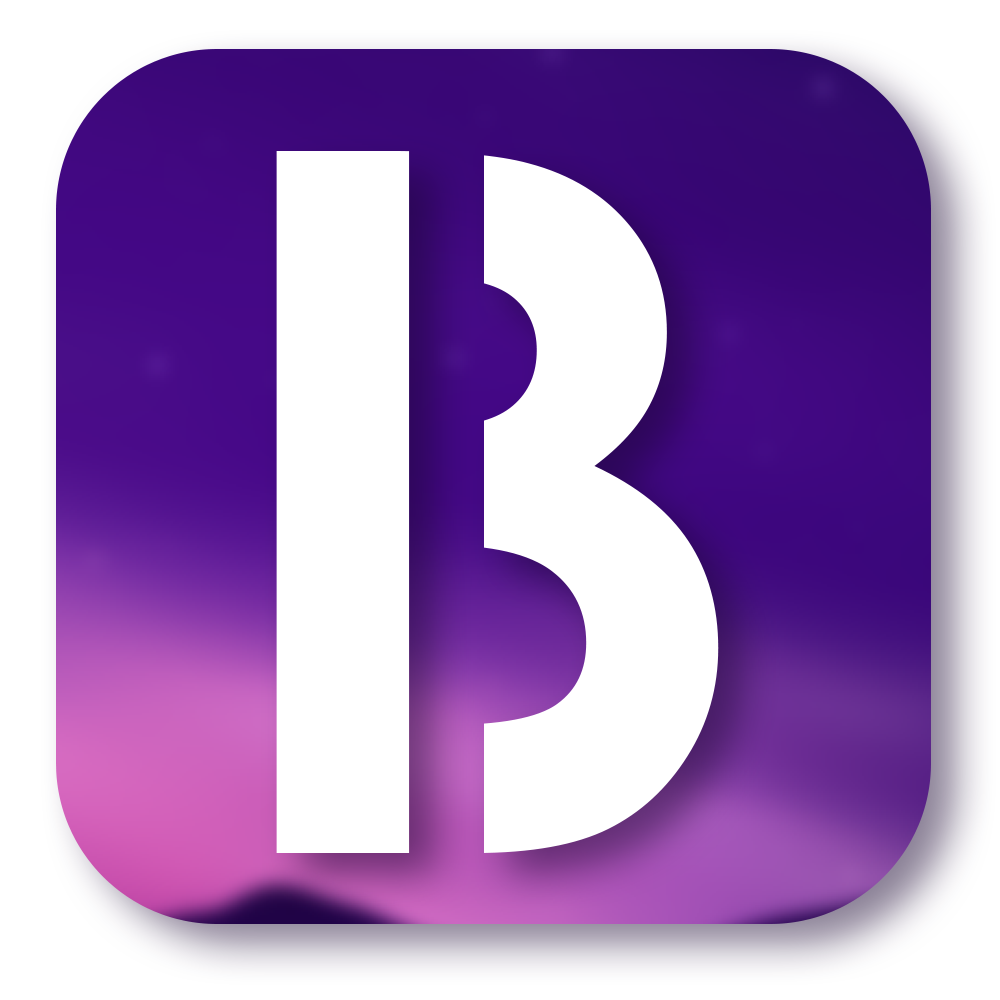
<style>
.page{position:relative;width:1000px;height:1000px;background:#ffffff}
.page>*{position:absolute;margin:0}
.t1{font:977.9px "CenturyGothic-Bold";letter-spacing:0.05em;color:#ffffff}
</style>
<div class="page">
<p class="t1" style="left:276px;top:151px;width:443px;height:702px">B</p>
</div>
